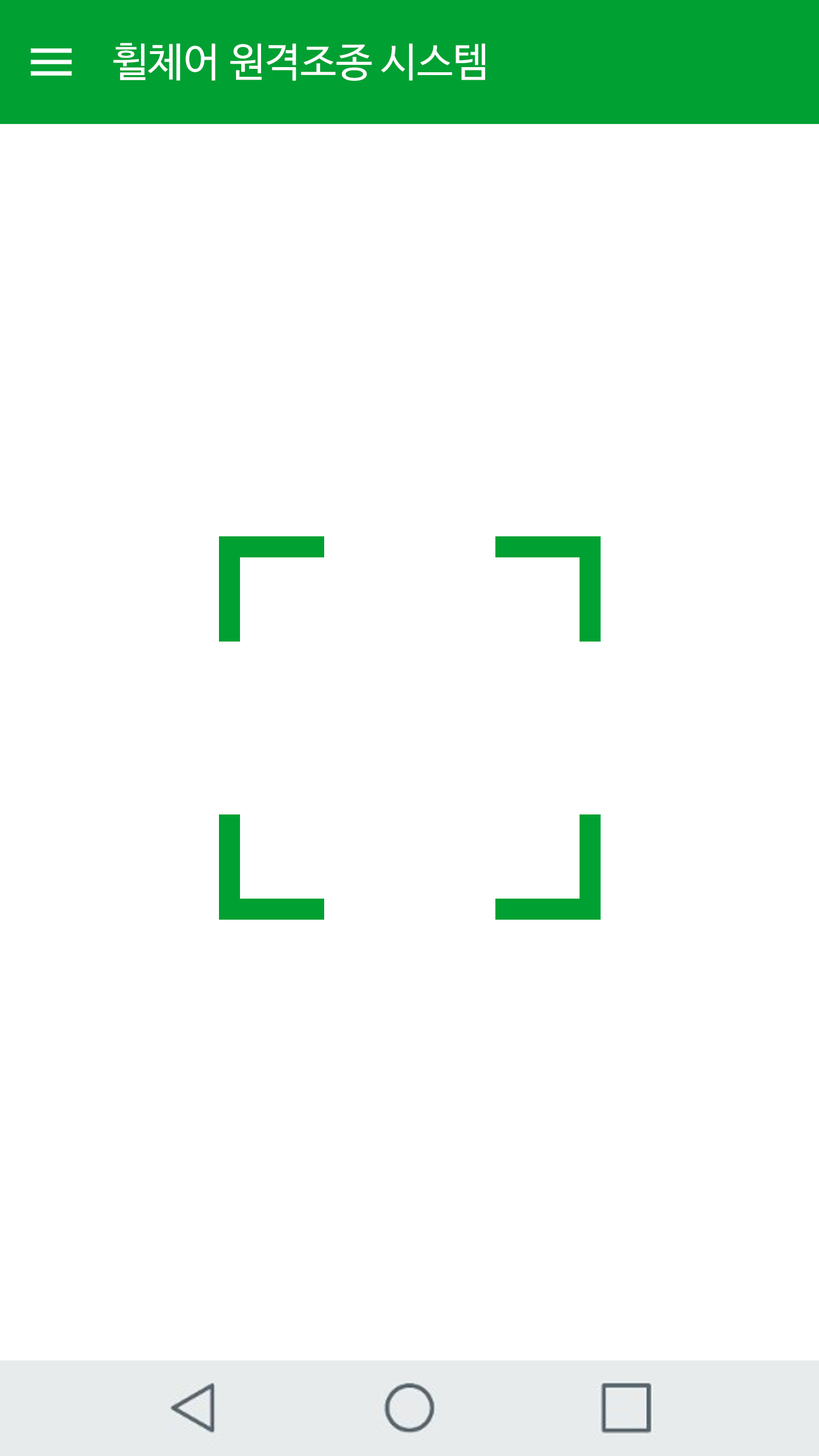
<style>
.page{position:relative;width:819px;height:1456px;background:#ffffff}
.page>*{position:absolute;margin:0}
.t1{font:40.3px "NanumBarunGothicOTF";color:#ffffff}
</style>
<div class="page">
<p class="t1" style="left:113px;top:43px;width:372px;height:38px">휠체어 원격조종 시스템</p>
</div>
